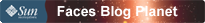
<style>
.page{position:relative;width:205px;height:23px}
.page>*{position:absolute;margin:0}
.t1{font:14px "Arial-BoldMT";color:#ffffff}
</style>
<div class="page">
<p class="t1" style="left:57px;top:6px;width:121px;height:13px">Faces Blog Planet</p>
</div>
